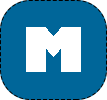
<style>
.page{position:relative;width:107px;height:100px;background:#006699}
.page>*{position:absolute;margin:0}
.t1{font:60px "GillSans-UltraBold";color:#ffffff}
</style>
<div class="page">
<p class="t1" style="left:26px;top:27px;width:55px;height:45px">M</p>
</div>
